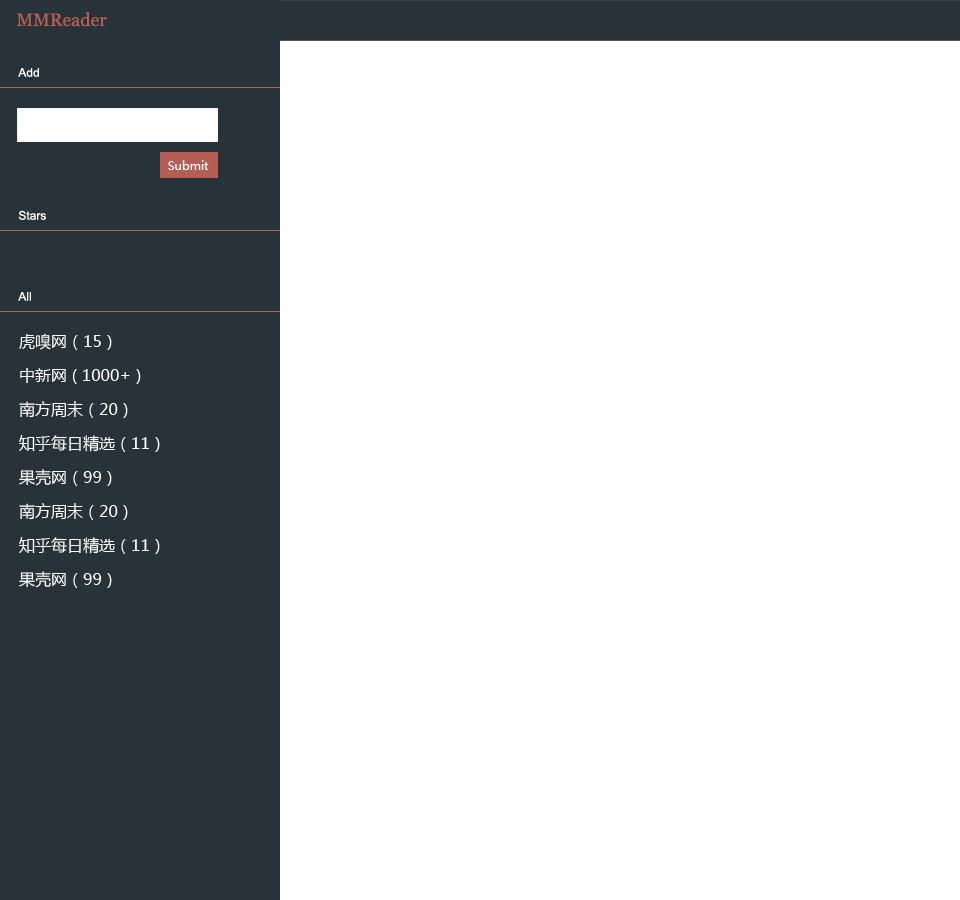
<style>
.page{position:relative;width:960px;height:900px;background:#ffffff}
.page>*{position:absolute;margin:0}
.t1{font:12px "ArialMT";color:#ffffff}
.t2{font:12px "MicrosoftYaHei";color:#ffffff}
.t3{font:16px/34px "MicrosoftYaHei";color:#ffffff}
</style>
<div class="page">
<p class="t1" style="left:18px;top:68px;width:21px;height:9px">Add</p>
<p class="t2" style="left:168px;top:160px;width:41px;height:10px">Submit</p>
<p class="t1" style="left:18px;top:210px;width:28px;height:10px">Stars</p>
<p class="t1" style="left:18px;top:292px;width:13px;height:9px">All</p>
<p class="t3" style="left:19px;top:333px;width:141px;height:255px">虎嗅网（15）<br>中新网 ( 1000+ )<br>南方周末（20）<br>知乎每日精选（11）<br>果壳网（99）<br>南方周末（20）<br>知乎每日精选（11）<br>果壳网（99）</p>
</div>
